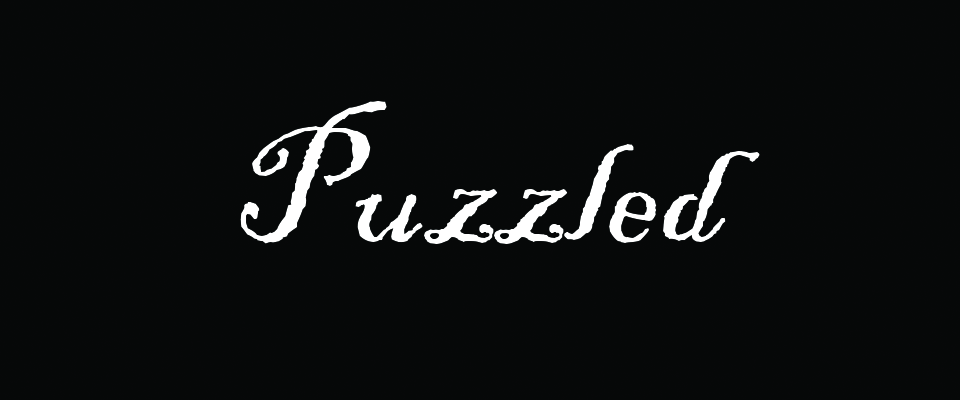
<style>
.page{position:relative;width:960px;height:400px;background:#060808}
.page>*{position:absolute;margin:0}
.t1{font:169.3px "BlackadderITC-Regular";color:#ffffff}
</style>
<div class="page">
<p class="t1" style="left:240px;top:101px;width:520px;height:143px">Puzzled</p>
</div>
